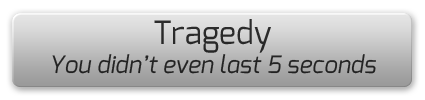
<style>
.page{position:relative;width:425px;height:100px}
.page>*{position:absolute;margin:0}
.t1{font:24px "Exo-Italic";color:#242424}
.t2{font:32px "Exo-Regular";color:#242424}
</style>
<div class="page">
<p class="t1" style="left:52px;top:19px;width:324px;height:55px;text-align:center"><span class="t2">Tragedy<br></span>You didn’t even last 5 seconds</p>
</div>
